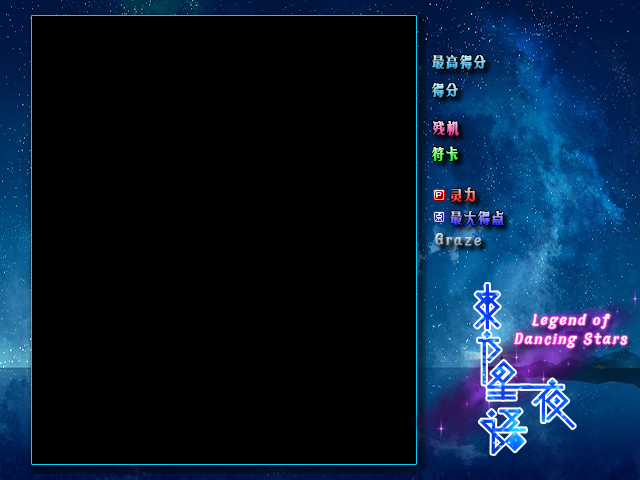
<style>
.page{position:relative;width:640px;height:480px;background:#000000}
.page>*{position:absolute;margin:0}
.t1{font:14px "MFMiaoMiao_Noncommercial-Regular";letter-spacing:0.15em;font-weight:bold}
.t2{font:13px/18px "MFMiaoMiao_Noncommercial-Regular";letter-spacing:0.15em;color:#ffffff;font-weight:bold;font-style:italic}
.t3{font:14px/18px "MFMiaoMiao_Noncommercial-Regular";letter-spacing:0.15em;color:#ffffff;font-weight:bold;font-style:italic}
</style>
<div class="page">
<p class="t1" style="left:432px;top:55px;width:54px;height:15px">最高得分</p>
<p class="t1" style="left:432px;top:83px;width:26px;height:15px">得分</p>
<p class="t1" style="left:433px;top:121px;width:26px;height:15px">残机</p>
<p class="t1" style="left:432px;top:146px;width:26px;height:15px">符卡</p>
<p class="t1" style="left:450px;top:187px;width:25px;height:15px">灵力</p>
<p class="t1" style="left:450px;top:211px;width:54px;height:15px">最大得点</p>
<p class="t1" style="left:435px;top:233px;width:46px;height:13px">Graze</p>
<p class="t2" style="left:514px;top:314px;width:113px;height:34px;text-align:center">Legend of Dancing Star<span class="t3">s</span></p>
</div>
